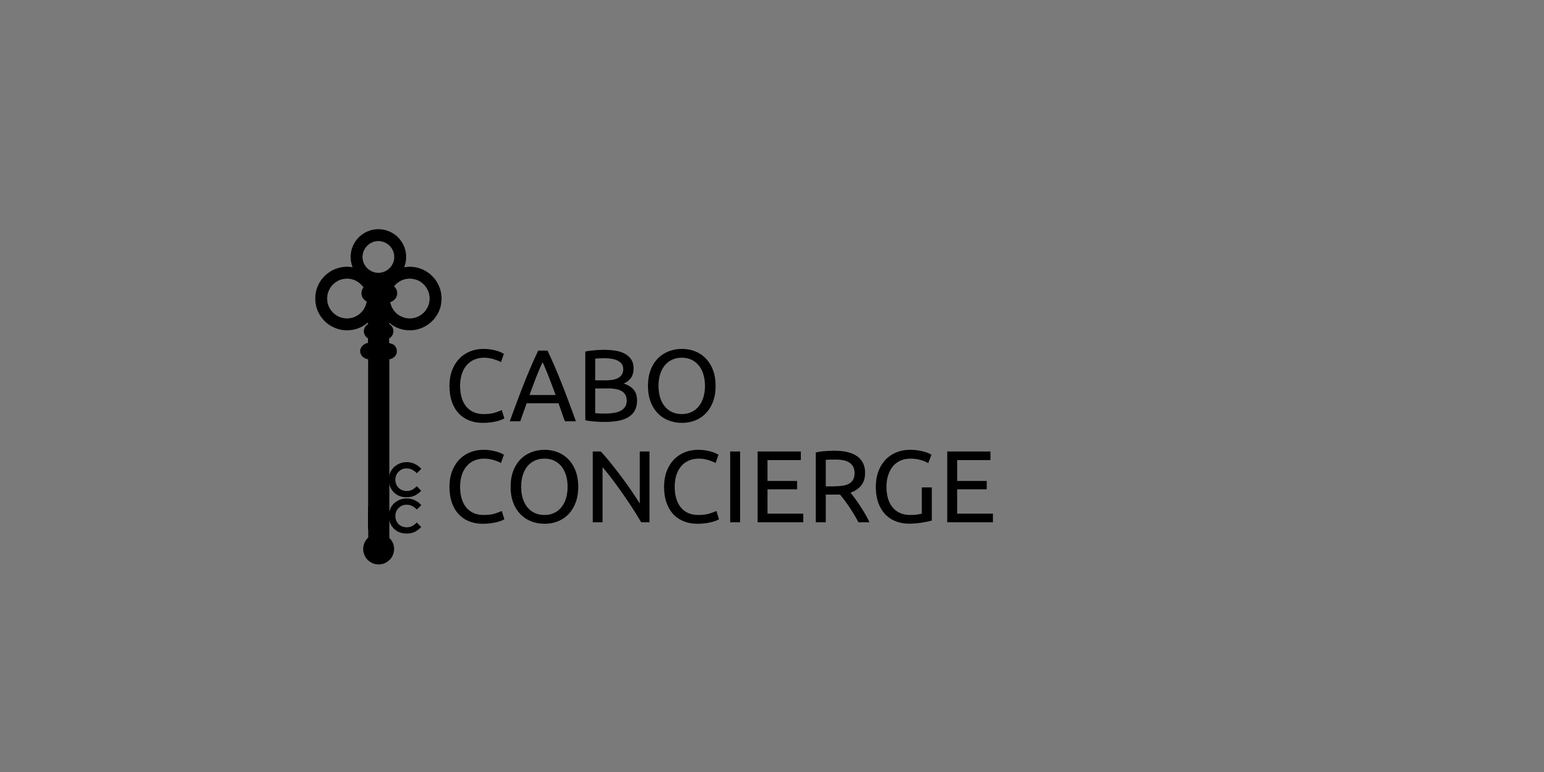
<style>
.page{position:relative;width:1544px;height:772px;background:#7a7a7a}
.page>*{position:absolute;margin:0}
.t1{font:101.9px/19.3px "Ubuntu";color:#000000}
.t2{font:46.3px/5.1px "CenturyGothic-Bold";color:#000000}
</style>
<div class="page">
<p class="t1" style="left:449px;top:349px;width:545px;height:175px">CABO<br><br>CONCIERGE</p>
<p class="t2" style="left:389px;top:462px;width:33px;height:72px">C<br>C</p>
</div>
